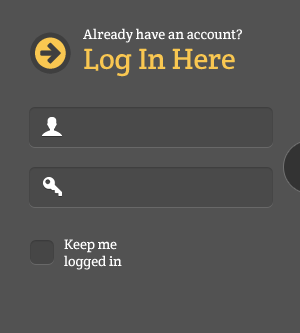
<style>
.page{position:relative;width:300px;height:333px;background:#525252}
.page>*{position:absolute;margin:0}
.t1{font:14px/30px "CreteRound-Regular";color:#ffffff}
.t2{font:30px/30px "CreteRound-Regular";color:#f9c751}
.t3{font:14px "CreteRound-Regular";color:#ffffff}
</style>
<div class="page">
<p class="t1" style="left:83px;top:28px;width:159px;height:49px">Already have an account?<br><span class="t2">Log In Here</span></p>
<p class="t3" style="left:64px;top:239px;width:58px;height:31px">Keep me<br>logged in</p>
</div>
